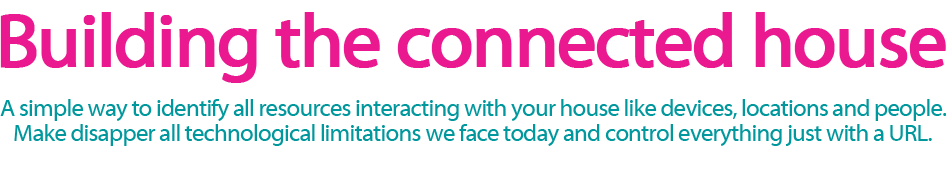
<style>
.page{position:relative;width:946px;height:170px;background:#ffffff}
.page>*{position:absolute;margin:0}
.t1{font:75.5px "MyriadWebPro";letter-spacing:-0.04em;color:#ea198f;font-weight:bold}
.t2{font:24.4px "MyriadWebPro";letter-spacing:-0.04em;color:#00979d}
</style>
<div class="page">
<p class="t1" style="left:0px;top:12px;width:946px;height:71px">Building the connected house</p>
<p class="t2" style="left:0px;top:99px;width:947px;height:22px">A simple way to identify all resources interacting with your house like devices, locations and people.</p>
<p class="t2" style="left:14px;top:124px;width:918px;height:22px">Make disapper all technological limitations we face today and control everything just with a URL.</p>
</div>
